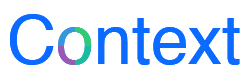
<style>
.page{position:relative;width:250px;height:80px;background:#ffffff}
.page>*{position:absolute;margin:0}
.t1{font:68px "Helvetica";color:#0b6aff}
</style>
<div class="page">
<p class="t1" style="left:10px;top:14px;width:230px;height:51px">Context</p>
</div>
